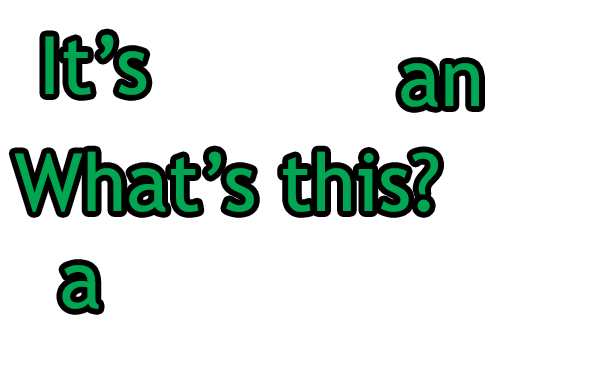
<style>
.page{position:relative;width:613px;height:374px;background:#ffffff}
.page>*{position:absolute;margin:0}
.t1{font:80px "TrebuchetMS";color:#00a651}
</style>
<div class="page">
<p class="t1" style="left:45px;top:34px;width:102px;height:61px">It’s</p>
<p class="t1" style="left:401px;top:63px;width:78px;height:44px">an</p>
<p class="t1" style="left:14px;top:151px;width:424px;height:61px">What’s this?</p>
<p class="t1" style="left:62px;top:265px;width:37px;height:44px">a</p>
</div>
